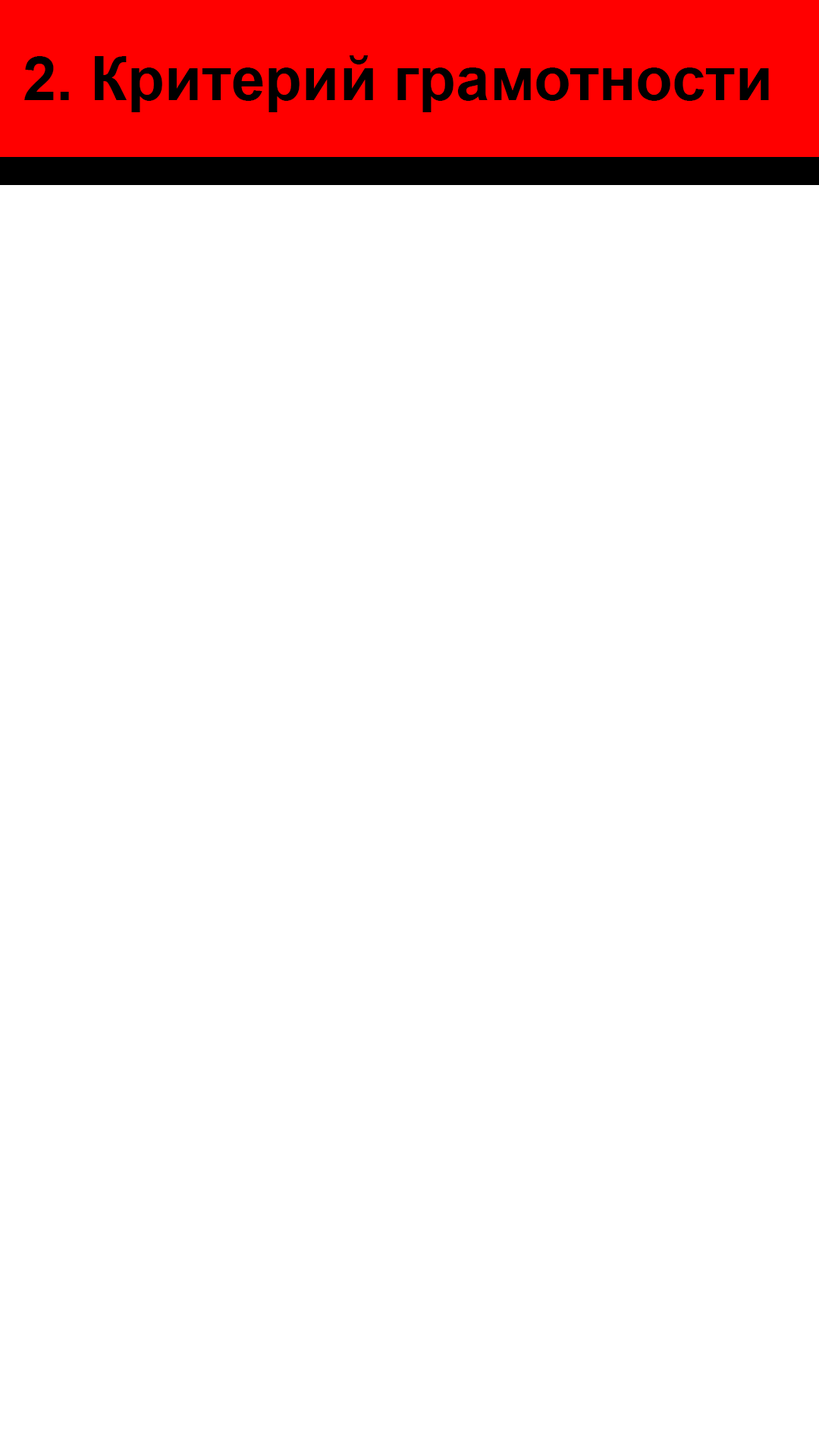
<style>
.page{position:relative;width:819px;height:1456px;background:#ffffff}
.page>*{position:absolute;margin:0}
.t1{font:60.7px "Arial-BoldMT";color:#000000}
</style>
<div class="page">
<p class="t1" style="left:24px;top:55px;width:745px;height:57px">2. Критерий грамотности</p>
</div>
